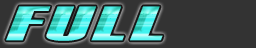
<style>
.page{position:relative;width:256px;height:48px;background:#333333}
.page>*{position:absolute;margin:0}
.t1{font:48px "Haettenschweiler";letter-spacing:0.05em;font-style:italic;scale:2.2 1}
</style>
<div class="page">
<p class="t1" style="left:6px;top:6px;width:157px;height:35px">FULL</p>
</div>
